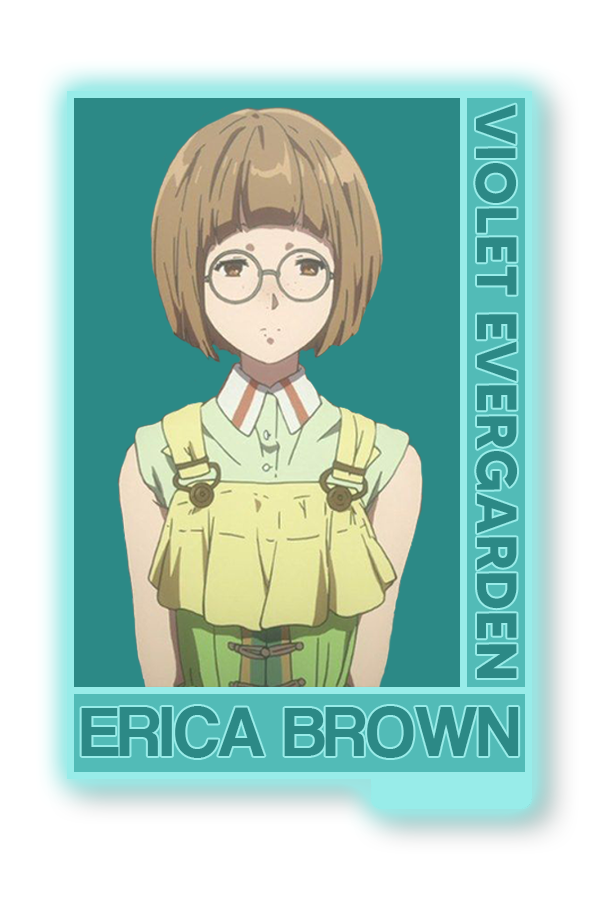
<style>
.page{position:relative;width:600px;height:900px;background:#2c8986}
.page>*{position:absolute;margin:0}
.t1{font:56.4px "MADETOMMY-Bold";color:#2c8986}
.t2{font:72.7px "CoolveticaRg-Regular";color:#2c8986}
</style>
<div class="page">
<p class="t1" style="left:475px;top:104px;width:43px;height:574px;rotate:90deg">VIOLET EVERGARDEN</p>
<p class="t2" style="left:81px;top:706px;width:438px;height:52px">ERICA BROWN</p>
</div>
